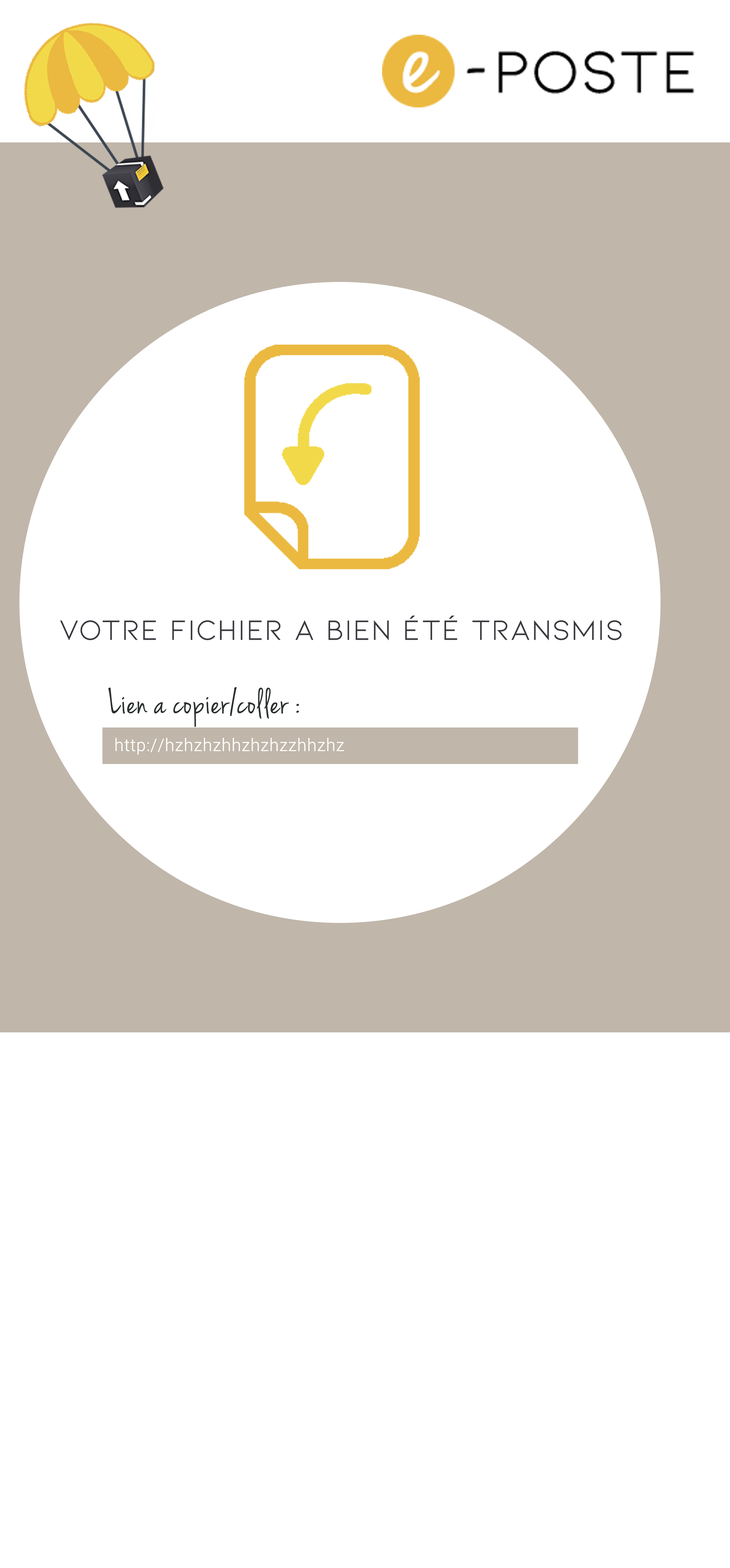
<style>
.page{position:relative;width:730px;height:1568px;background:#ffffff}
.page>*{position:absolute;margin:0}
.t1{font:29.4px "Kiona-Regular";color:#3b3a40;font-weight:bold}
.t2{font:36.8px "JennaSue";color:#2a302e;font-weight:bold}
.t3{font:17.2px "Roboto-Light";color:#ffffff;font-weight:bold}
</style>
<div class="page">
<p class="t1" style="left:60px;top:615px;width:562px;height:25px">Votre fichier a bien été TRANSMIS</p>
<p class="t2" style="left:108px;top:687px;width:191px;height:40px">Lien a copier/coller :</p>
<p class="t3" style="left:115px;top:738px;width:229px;height:17px">http://hzhzhzhhzhzhzzhhzhz</p>
</div>
